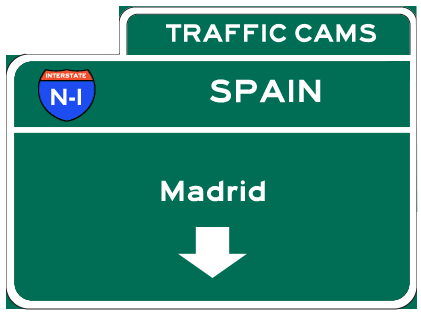
<style>
.page{position:relative;width:421px;height:313px;background:#006e55}
.page>*{position:absolute;margin:0}
.t1{font:26px "Roadgeek2005SeriesF";color:#ffffff}
.t2{font:6px "Roadgeek2005SeriesF";color:#ffffff}
.t3{font:24px "Roadgeek2005SeriesF";color:#ffffff}
.t4{font:33px "Roadgeek2005SeriesF";color:#ffffff}
.t5{font:30px "Roadgeek2005SeriesF";color:#ffffff}
</style>
<div class="page">
<p class="t1" style="left:166px;top:23px;width:210px;height:20px">TRAFFIC CAMS</p>
<p class="t2" style="left:46px;top:73px;width:40px;height:5px">INTERSTATE</p>
<p class="t3" style="left:51px;top:88px;width:30px;height:17px">N-I</p>
<p class="t4" style="left:210px;top:79px;width:111px;height:24px">SPAIN</p>
<p class="t5" style="left:161px;top:180px;width:104px;height:22px">Madrid</p>
</div>
